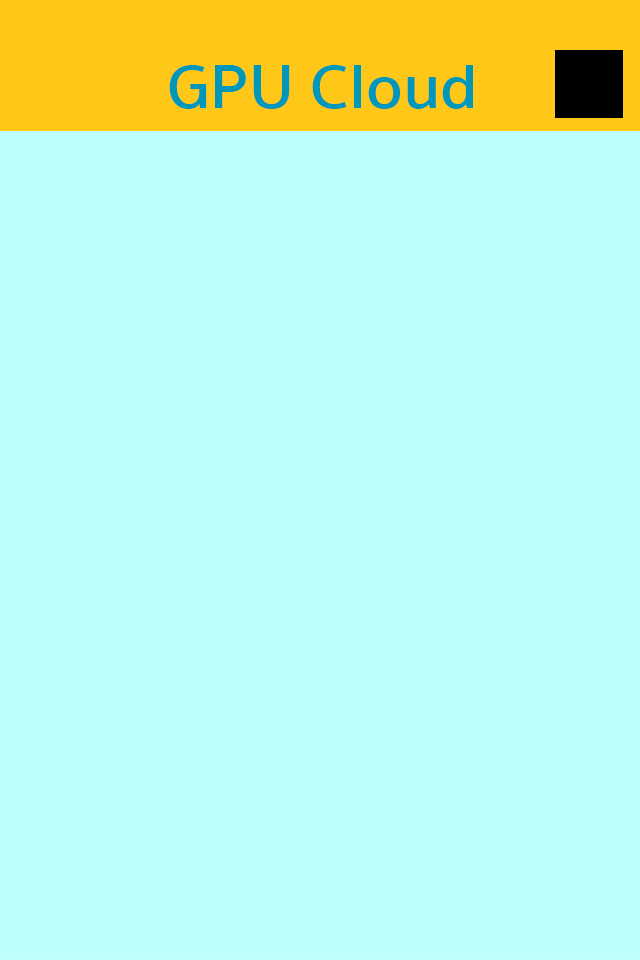
<style>
.page{position:relative;width:640px;height:960px;background:#bdfffa}
.page>*{position:absolute;margin:0}
.t1{font:63.9px "SukhumvitSet-SemiBold";color:#0097b8;scale:1.05 1}
</style>
<div class="page">
<p class="t1" style="left:169px;top:65px;width:304px;height:44px">GPU Cloud</p>
</div>
